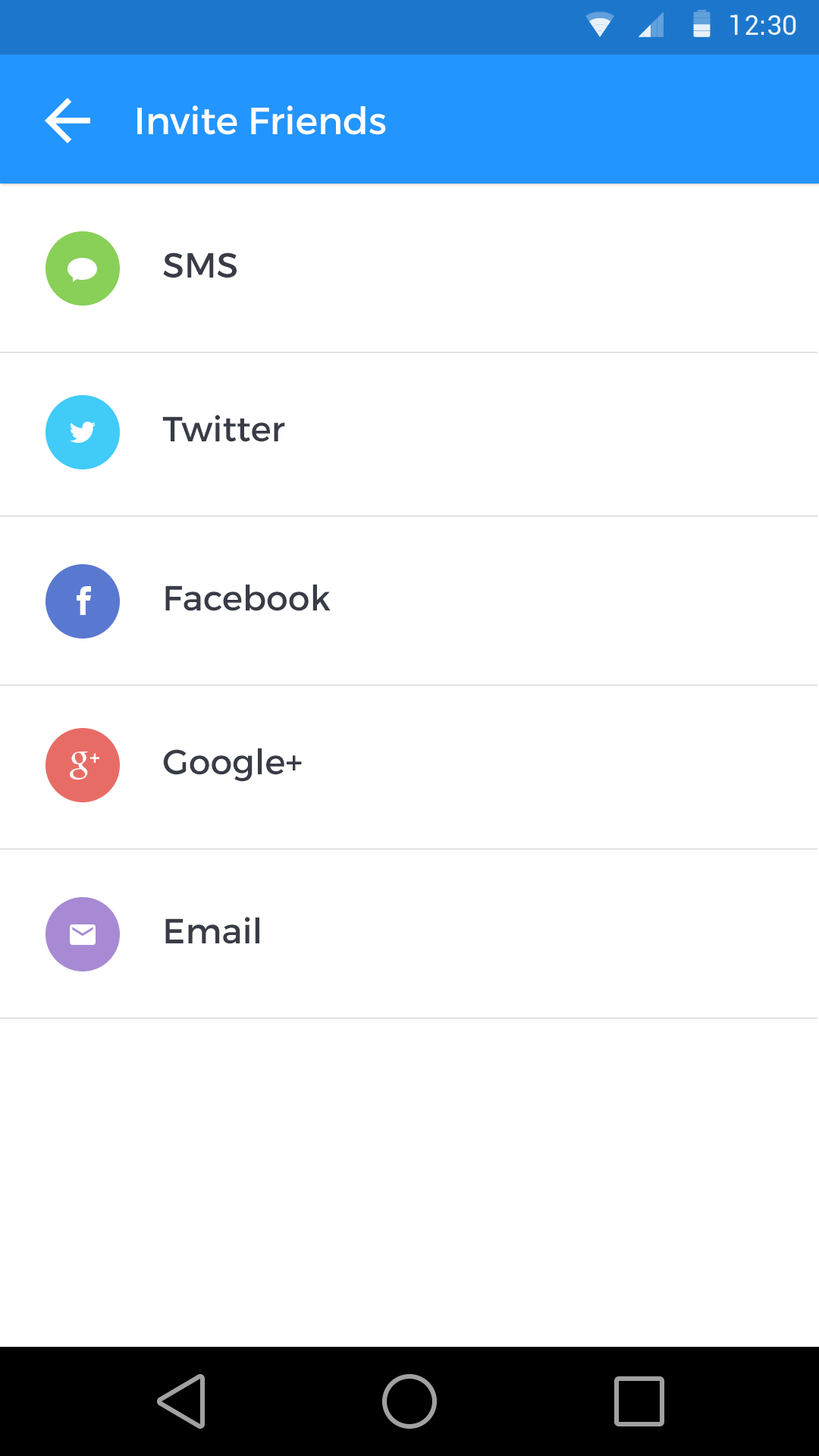
<style>
.page{position:relative;width:819px;height:1456px;background:#ffffff}
.page>*{position:absolute;margin:0}
.t1{font:37.9px "Montserrat-Regular";color:#ffffff}
.t2{font:34.9px "Montserrat-Regular";color:#383c46}
</style>
<div class="page">
<p class="t1" style="left:137px;top:105px;width:249px;height:30px">Invite Friends</p>
<p class="t2" style="left:163px;top:253px;width:74px;height:25px">SMS</p>
<p class="t2" style="left:162px;top:415px;width:123px;height:27px">Twitter</p>
<p class="t2" style="left:165px;top:584px;width:166px;height:27px">Facebook</p>
<p class="t2" style="left:163px;top:748px;width:139px;height:34px">Google+</p>
<p class="t2" style="left:165px;top:917px;width:94px;height:27px">Email</p>
</div>
